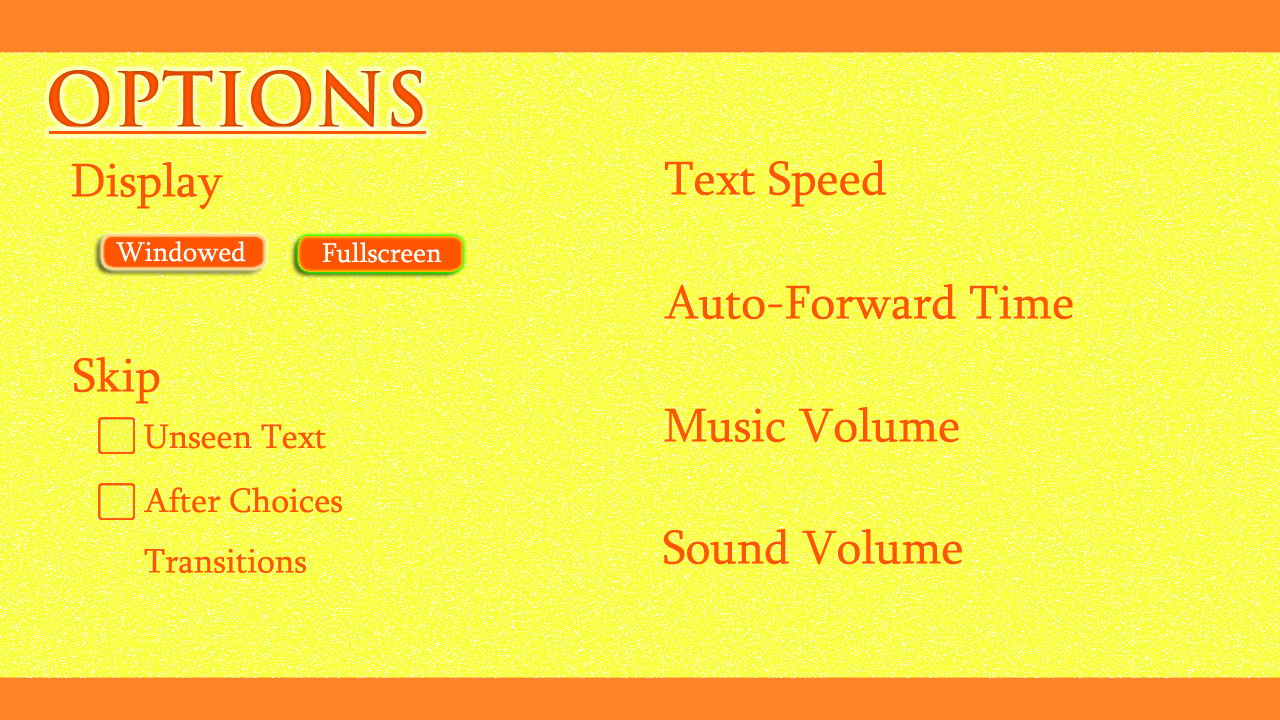
<style>
.page{position:relative;width:1280px;height:720px;background:#f9ff41}
.page>*{position:absolute;margin:0}
.t1{font:73.6px "TrajanPro-Bold";color:#ff5400}
.t2{font:48.6px "Sylfaen";color:#ff5400}
.t3{font:27.8px "Sylfaen";color:#ffffff}
.t4{font:34.7px "Sylfaen";color:#ff5400}
</style>
<div class="page">
<p class="t1" style="left:49px;top:69px;width:374px;height:59px">OPTIONS</p>
<p class="t2" style="left:665px;top:160px;width:221px;height:47px">Text Speed</p>
<p class="t2" style="left:71px;top:162px;width:152px;height:48px">Display</p>
<p class="t3" style="left:116px;top:241px;width:130px;height:21px">Windowed</p>
<p class="t3" style="left:322px;top:242px;width:120px;height:21px">Fullscreen</p>
<p class="t2" style="left:664px;top:284px;width:409px;height:36px">Auto-Forward Time</p>
<p class="t2" style="left:74px;top:357px;width:86px;height:47px">Skip</p>
<p class="t2" style="left:664px;top:407px;width:295px;height:36px">Music Volume</p>
<p class="t4" style="left:144px;top:424px;width:182px;height:25px">Unseen Text</p>
<p class="t4" style="left:144px;top:487px;width:198px;height:26px">After Choices</p>
<p class="t2" style="left:664px;top:529px;width:298px;height:36px">Sound Volume</p>
<p class="t4" style="left:144px;top:548px;width:162px;height:25px">Transitions</p>
</div>
